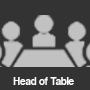
<style>
.page{position:relative;width:90px;height:90px;background:#333333}
.page>*{position:absolute;margin:0}
.t1{font:11px "CoolveticaRg-Regular";color:#ffffff}
</style>
<div class="page">
<p class="t1" style="left:13px;top:77px;width:61px;height:8px">Head of Table</p>
</div>
